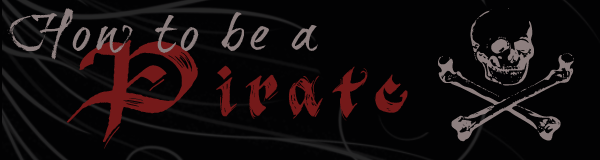
<style>
.page{position:relative;width:600px;height:160px;background:#020203}
.page>*{position:absolute;margin:0}
.t1{font:52px "BrushtipTravis";letter-spacing:0.06em;color:#8d7f7f}
.t2{font:176.4px "PiratesTwo";letter-spacing:0.26em;color:#8d7f7f}
.t3{font:44.1px "BlackFlag";letter-spacing:0.26em;color:#741919}
.t4{font:69px "BlackFlag";letter-spacing:0.26em;color:#741919}
</style>
<div class="page">
<p class="t1" style="left:7px;top:8px;width:311px;height:52px">How to be a</p>
<p class="t2" style="left:438px;top:8px;width:136px;height:134px">Z</p>
<p class="t3" style="left:66px;top:39px;width:342px;height:110px"><span class="t4">P</span>irate</p>
</div>
